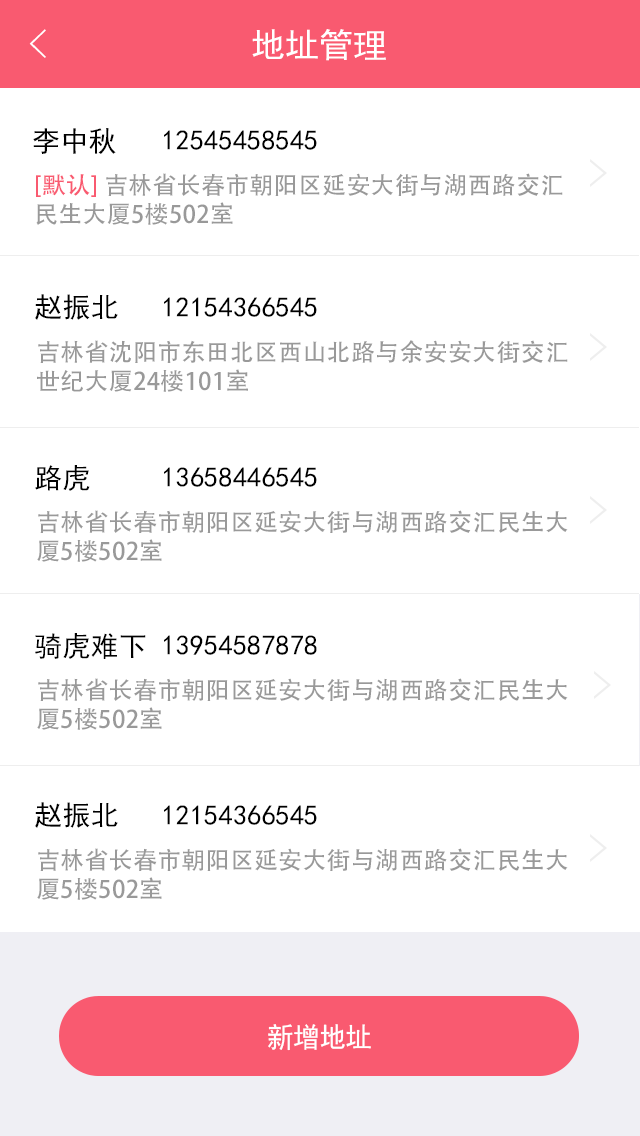
<style>
.page{position:relative;width:640px;height:1136px;background:#ffffff}
.page>*{position:absolute;margin:0}
.t1{font:40px "FZYXJW--GB1-0";color:#ffffff}
.t2{font:34px "SimHei";color:#ffffff}
.t3{font:28px "SimHei";letter-spacing:0.01em;color:#000000}
.t4{font:24px "AdobeHeitiStd-Regular";letter-spacing:0.01em;color:#999999}
.t5{font:24px "AdobeHeitiStd-Regular";letter-spacing:0.01em;color:#f95a70}
.t6{font:28px "SimHei";color:#ffffff;scale:0.94 1}
</style>
<div class="page">
<p class="t1" style="left:29px;top:29px;width:17px;height:29px">&lt;</p>
<p class="t2" style="left:252px;top:29px;width:134px;height:32px">地址管理</p>
<p class="t3" style="left:33px;top:128px;width:83px;height:26px">李中秋</p>
<p class="t3" style="left:164px;top:130px;width:153px;height:20px">12545458545</p>
<p class="t4" style="left:36px;top:173px;width:527px;height:52px"><span class="t5">[默认] </span>吉林省长春市朝阳区延安大街与湖西路交汇<br>民生大厦5楼502室</p>
<p class="t3" style="left:35px;top:294px;width:83px;height:26px">赵振北</p>
<p class="t3" style="left:164px;top:297px;width:153px;height:20px">12154366545</p>
<p class="t4" style="left:37px;top:340px;width:531px;height:52px">吉林省沈阳市东田北区西山北路与余安安大街交汇<br>世纪大厦24楼101室</p>
<p class="t3" style="left:35px;top:465px;width:55px;height:26px">路虎</p>
<p class="t3" style="left:164px;top:467px;width:153px;height:20px">13658446545</p>
<p class="t4" style="left:37px;top:510px;width:531px;height:52px">吉林省长春市朝阳区延安大街与湖西路交汇民生大<br>厦5楼502室</p>
<p class="t3" style="left:35px;top:633px;width:111px;height:26px">骑虎难下</p>
<p class="t3" style="left:164px;top:635px;width:153px;height:20px">13954587878</p>
<p class="t4" style="left:37px;top:678px;width:531px;height:52px">吉林省长春市朝阳区延安大街与湖西路交汇民生大<br>厦5楼502室</p>
<p class="t3" style="left:35px;top:802px;width:83px;height:26px">赵振北</p>
<p class="t3" style="left:164px;top:805px;width:153px;height:20px">12154366545</p>
<p class="t4" style="left:37px;top:848px;width:531px;height:52px">吉林省长春市朝阳区延安大街与湖西路交汇民生大<br>厦5楼502室</p>
<p class="t6" style="left:268px;top:1024px;width:103px;height:27px">新增地址</p>
</div>
